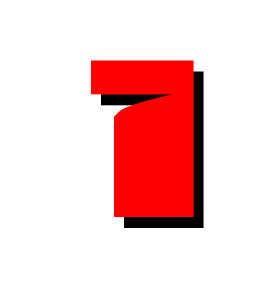
<style>
.page{position:relative;width:274px;height:300px;background:#ffffff}
.page>*{position:absolute;margin:0}
.t1{font:250px "Interdiction";color:#ff0000}
</style>
<div class="page">
<p class="t1" style="left:91px;top:60px;width:103px;height:157px">1</p>
<p class="t1" style="left:101px;top:71px;width:103px;height:157px">1</p>
</div>
